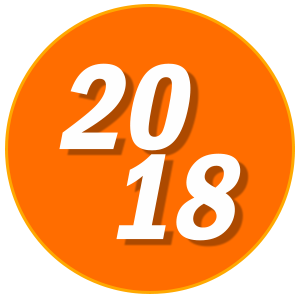
<style>
.page{position:relative;width:300px;height:300px;background:#ff6d00}
.page>*{position:absolute;margin:0}
.t1{font:128.3px "FranklinGothic-DemiCond";color:#fefefe}
</style>
<div class="page">
<p class="t1" style="left:59px;top:63px;width:132px;height:88px">20</p>
<p class="t1" style="left:116px;top:153px;width:125px;height:88px">18</p>
</div>
